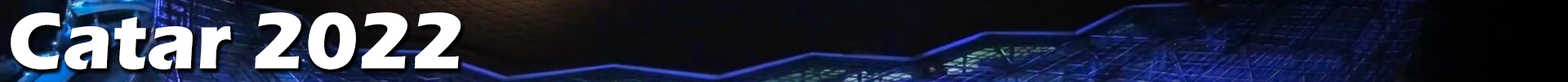
<style>
.page{position:relative;width:1568px;height:82px}
.page>*{position:absolute;margin:0}
.t1{font:81.7px "ErasITC-Bold";color:#ffffff}
</style>
<div class="page">
<p class="t1" style="left:11px;top:12px;width:450px;height:57px">Catar 2022</p>
</div>
